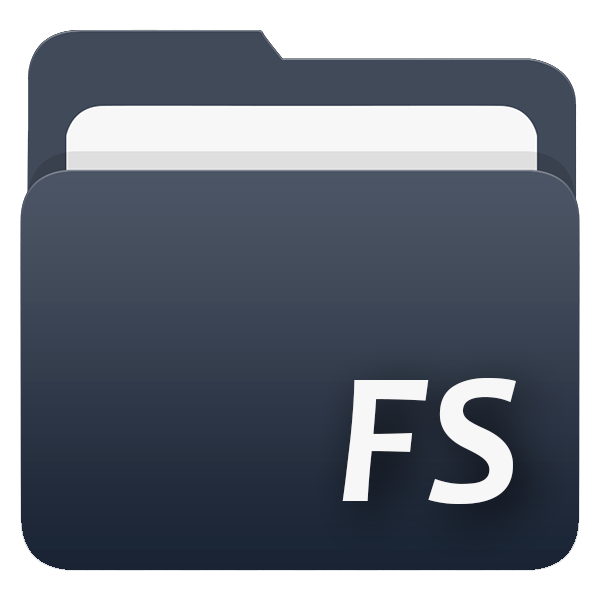
<style>
.page{position:relative;width:600px;height:600px}
.page>*{position:absolute;margin:0}
.t1{font:190px "Candara-BoldItalic";color:#f7f7f8}
</style>
<div class="page">
<p class="t1" style="left:342px;top:378px;width:174px;height:126px">FS</p>
</div>
